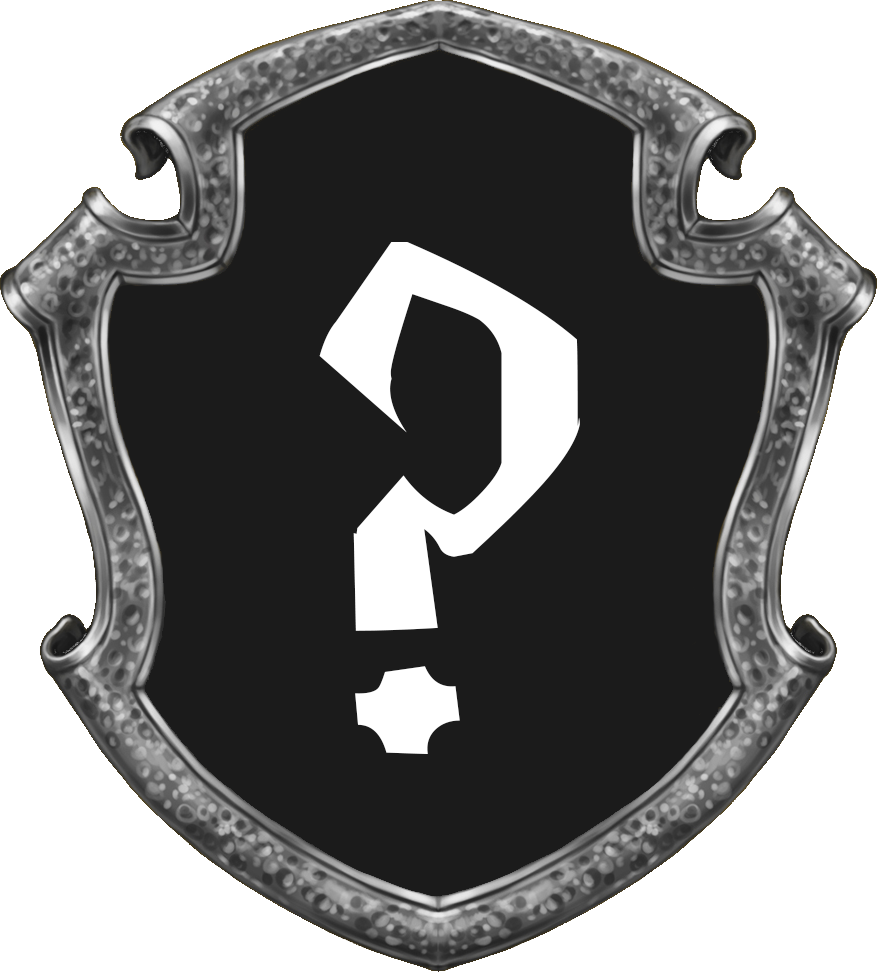
<style>
.page{position:relative;width:877px;height:972px;background:#1b1b1b}
.page>*{position:absolute;margin:0}
.t1{font:711.8px "HarryP";color:#ffffff}
</style>
<div class="page">
<p class="t1" style="left:319px;top:242px;width:261px;height:512px">?</p>
</div>
